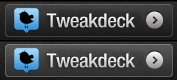
<style>
.page{position:relative;width:177px;height:80px}
.page>*{position:absolute;margin:0}
.t1{font:19.2px "HelveticaNeueLTCom-MdCn";letter-spacing:-0.025em;scale:1.1 1}
</style>
<div class="page">
<p class="t1" style="left:46px;top:13px;width:90px;height:15px">Tweakdeck</p>
<p class="t1" style="left:46px;top:53px;width:90px;height:15px">Tweakdeck</p>
</div>
